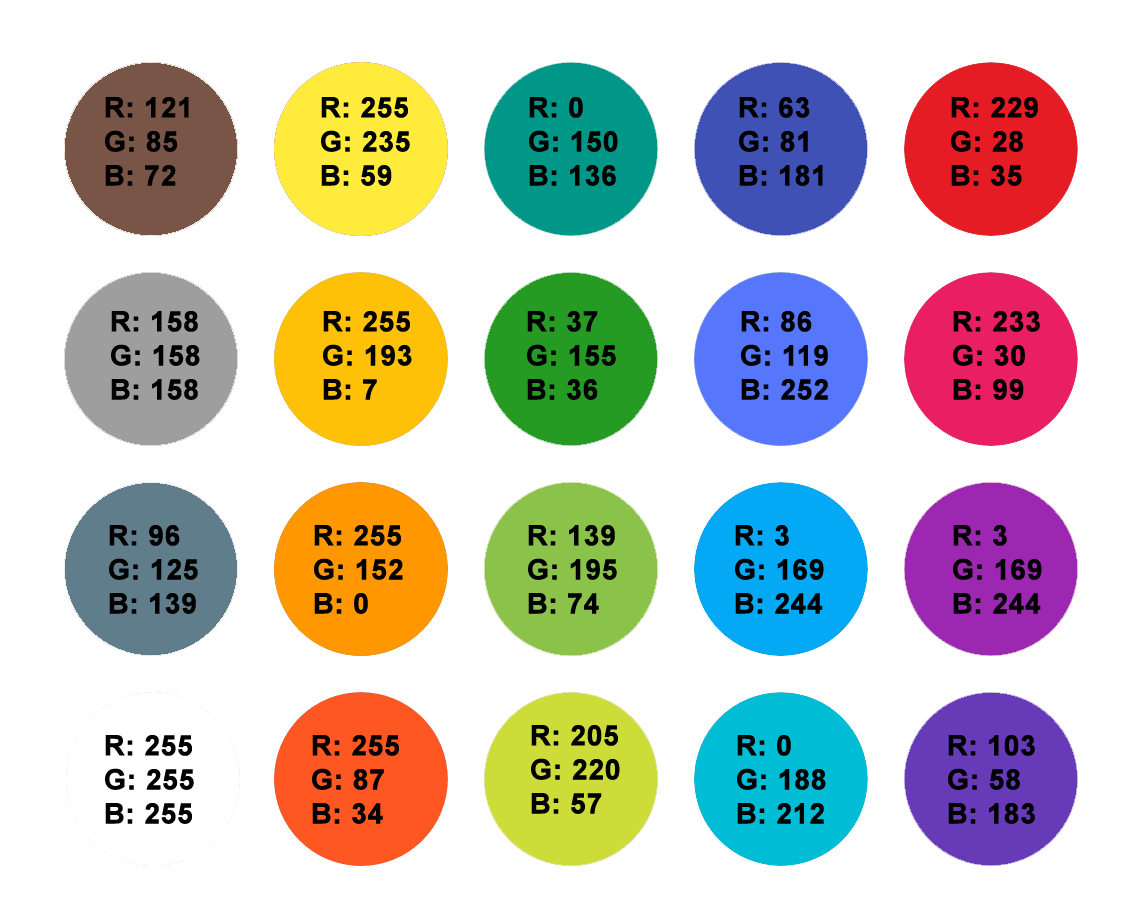
<style>
.page{position:relative;width:1138px;height:922px;background:#ffffff}
.page>*{position:absolute;margin:0}
.t1{font:28.3px "Arial-BoldMT";color:#000000;text-transform:uppercase;font-weight:bold}
</style>
<div class="page">
<p class="t1" style="left:105px;top:97px;width:84px;height:89px">R: 121<br>G: 85<br>B: 72</p>
<p class="t1" style="left:321px;top:97px;width:89px;height:89px">R: 255<br>G: 235<br>B: 59</p>
<p class="t1" style="left:529px;top:97px;width:89px;height:89px">R: 0<br>G: 150<br>B: 136</p>
<p class="t1" style="left:739px;top:97px;width:84px;height:89px">R: 63<br>G: 81<br>B: 181</p>
<p class="t1" style="left:951px;top:97px;width:87px;height:89px">R: 229<br>G: 28<br>B: 35</p>
<p class="t1" style="left:111px;top:311px;width:89px;height:89px">R: 158<br>G: 158<br>B: 158</p>
<p class="t1" style="left:323px;top:311px;width:89px;height:89px">R: 255<br>G: 193<br>B: 7</p>
<p class="t1" style="left:527px;top:311px;width:89px;height:89px">R: 37<br>G: 155<br>B: 36</p>
<p class="t1" style="left:741px;top:311px;width:87px;height:89px">R: 86<br>G: 119<br>B: 252</p>
<p class="t1" style="left:953px;top:311px;width:87px;height:89px">R: 233<br>G: 30<br>B: 99</p>
<p class="t1" style="left:109px;top:525px;width:89px;height:89px">R: 96<br>G: 125<br>B: 139</p>
<p class="t1" style="left:314px;top:525px;width:89px;height:89px">R: 255<br>G: 152<br>B: 0</p>
<p class="t1" style="left:528px;top:525px;width:89px;height:89px">R: 139<br>G: 195<br>B: 74</p>
<p class="t1" style="left:735px;top:525px;width:89px;height:89px">R: 3<br>G: 169<br>B: 244</p>
<p class="t1" style="left:953px;top:525px;width:89px;height:89px">R: 3<br>G: 169<br>B: 244</p>
<p class="t1" style="left:531px;top:725px;width:89px;height:89px">R: 205<br>G: 220<br>B: 57</p>
<p class="t1" style="left:105px;top:735px;width:89px;height:89px">R: 255<br>G: 255<br>B: 255</p>
<p class="t1" style="left:312px;top:735px;width:87px;height:89px">R: 255<br>G: 87<br>B: 34</p>
<p class="t1" style="left:737px;top:735px;width:89px;height:89px">R: 0<br>G: 188<br>B: 212</p>
<p class="t1" style="left:948px;top:735px;width:87px;height:89px">R: 103<br>G: 58<br>B: 183</p>
</div>
